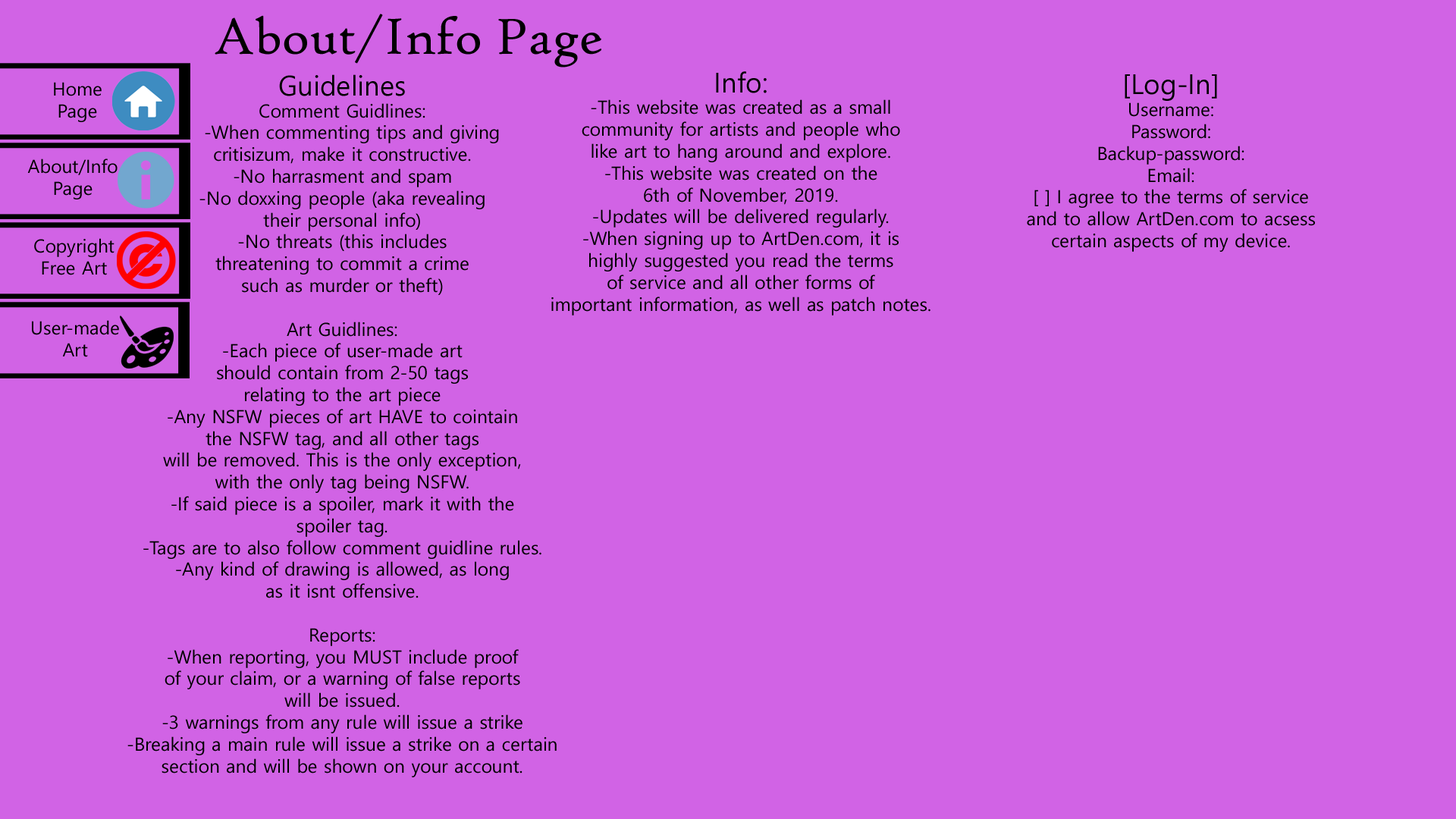
<style>
.page{position:relative;width:1456px;height:819px;background:#d163e5}
.page>*{position:absolute;margin:0}
.t1{font:54.6px "HighTowerText-Reg";color:#000000}
.t2{font:18.2px "MalgunGothic";color:#000000}
.t3{font:27.3px "MalgunGothic";color:#000000}
</style>
<div class="page">
<p class="t1" style="left:215px;top:14px;width:386px;height:53px">About/Info Page</p>
<p class="t2" style="left:127px;top:74px;width:430px;height:703px;text-align:center"><span class="t3">Guidelines<br></span>Comment Guidlines:<br>   -When commenting tips and giving <br>critisizum, make it constructive. <br>-No harrasment and spam<br>-No doxxing people (aka revealing<br>their personal info)<br>-No threats (this includes <br>threatening to commit a crime <br>such as murder or theft)<br><br>Art Guidlines: <br>-Each piece of user-made art<br>should contain from 2-50 tags <br>relating to the art piece<br>-Any NSFW pieces of art HAVE to cointain <br>the NSFW tag, and all other tags<br>will be removed. This is the only exception,<br>with the only tag being NSFW. <br>-If said piece is a spoiler, mark it with the<br>spoiler tag. <br>-Tags are to also follow comment guidline rules. <br>-Any kind of drawing is allowed, as long<br>as it isnt offensive.<br><br>Reports: <br>-When reporting, you MUST include proof<br>of your claim, or a warning of false reports<br>will be issued. <br>-3 warnings from any rule will issue a strike<br>-Breaking a main rule will issue a strike on a certain<br>section and will be shown on your account.</p>
<p class="t2" style="left:551px;top:71px;width:379px;height:244px;text-align:center"><span class="t3">Info: <br></span>-This website was created as a small<br>community for artists and people who <br>like art to hang around and explore. <br>-This website was created on the <br>6th of November, 2019. <br>-Updates will be delivered regularly. <br>-When signing up to ArtDen.com, it is<br>highly suggested you read the terms<br>of service and all other forms of <br>important information, as well as patch notes.</p>
<p class="t2" style="left:1027px;top:74px;width:288px;height:178px;text-align:center"><span class="t3">[Log-In] <br></span>Username: <br>Password:<br>Backup-password:<br>Email:<br>[ ] I agree to the terms of service <br>and to allow ArtDen.com to acsess <br>certain aspects of my device.</p>
<p class="t2" style="left:54px;top:82px;width:48px;height:40px;text-align:center">Home<br>Page</p>
<p class="t2" style="left:27px;top:158px;width:91px;height:41px;text-align:center">About/Info <br>Page</p>
<p class="t2" style="left:34px;top:238px;width:81px;height:37px;text-align:center">Copyright<br>Free Art</p>
<p class="t2" style="left:32px;top:320px;width:87px;height:37px;text-align:center">User-made<br>Art</p>
</div>
